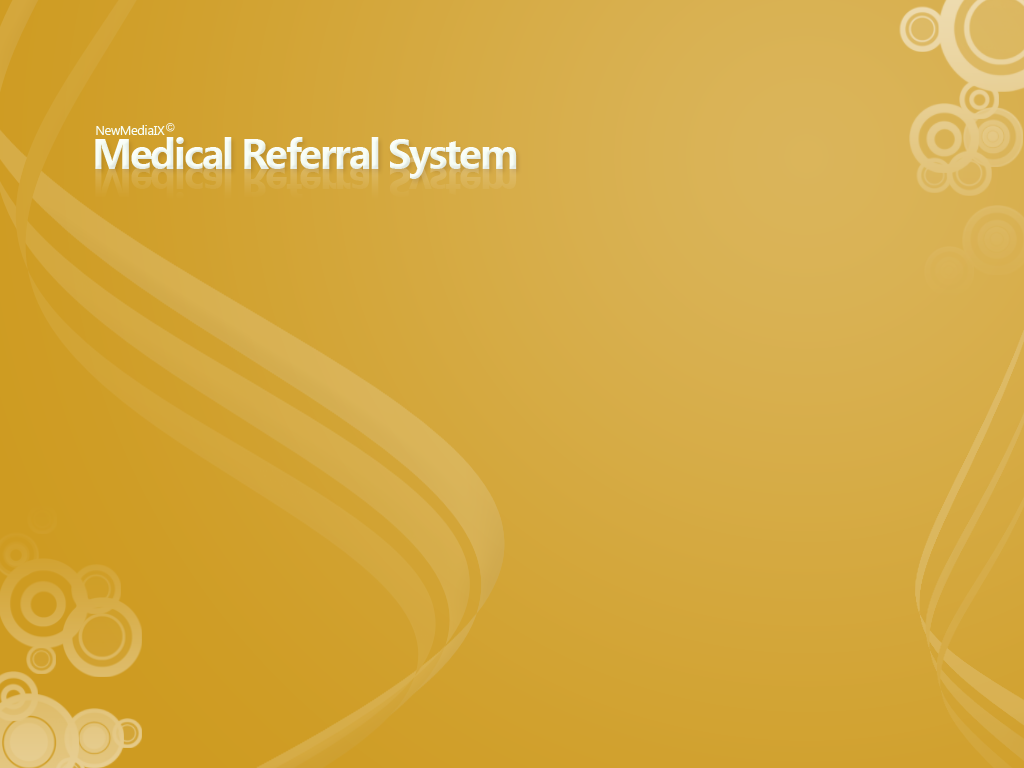
<style>
.page{position:relative;width:1024px;height:768px}
.page>*{position:absolute;margin:0}
.t1{font:12.5px "SegoeUI";letter-spacing:-0.01em;color:#f6fdf4}
.t2{font:41.7px "SegoeUI-Bold";letter-spacing:-0.05em;color:#f6fdf4}
</style>
<div class="page">
<p class="t1" style="left:96px;top:125px;width:69px;height:10px">NewMediaIX</p>
<p class="t2" style="left:95px;top:137px;width:422px;height:42px">Medical Referral System</p>
</div>
